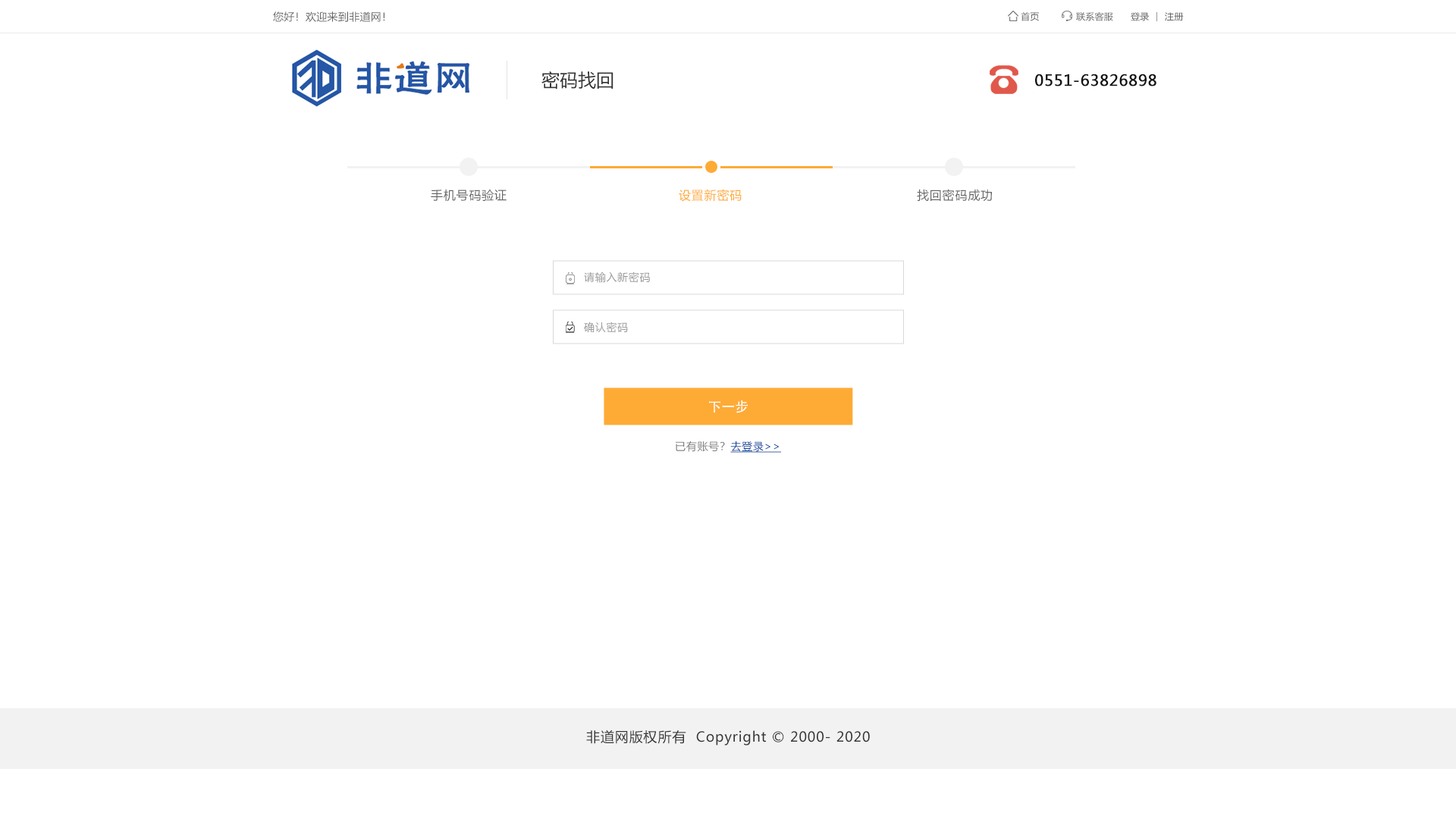
<style>
.page{position:relative;width:1456px;height:819px;background:#ffffff}
.page>*{position:absolute;margin:0}
.t1{font:10.6px "MicrosoftYaHei";letter-spacing:0.022em;color:#666666}
.t2{font:9.1px "MicrosoftYaHei";letter-spacing:0.022em;color:#666666}
.t3{font:18.2px "MicrosoftYaHei";color:#333333}
.t4{font:15.2px "MicrosoftYaHei";letter-spacing:0.022em;color:#121212;font-weight:bold}
.t5{font:12.1px "MicrosoftYaHei";letter-spacing:0.05em;color:#666666}
.t6{font:12.1px "MicrosoftYaHei";letter-spacing:0.05em;color:#feab36}
.t7{font:10.6px "MicrosoftYaHei";letter-spacing:0.05em;color:#999999}
.t8{font:13.5px "AdobeHeitiStd-Regular";color:#ffffff}
.t9{font:10.6px "MicrosoftYaHei";letter-spacing:0.05em;color:#7f7f7f}
.t10{font:10.6px "MicrosoftYaHei";letter-spacing:0.05em;color:#13489e;text-decoration:underline}
.t11{font:13.6px "MicrosoftYaHei";letter-spacing:0.05em;color:#333333}
</style>
<div class="page">
<p class="t1" style="left:273px;top:11px;width:112px;height:11px">您好！欢迎来到非道网！</p>
<p class="t2" style="left:1021px;top:12px;width:18px;height:9px">首页</p>
<p class="t2" style="left:1076px;top:12px;width:37px;height:9px">联系客服</p>
<p class="t2" style="left:1131px;top:12px;width:18px;height:9px">登录</p>
<p class="t2" style="left:1165px;top:12px;width:19px;height:9px">注册</p>
<p class="t3" style="left:541px;top:71px;width:72px;height:18px">密码找回</p>
<p class="t4" style="left:1035px;top:74px;width:121px;height:12px">0551-63826898</p>
<p class="t5" style="left:431px;top:189px;width:76px;height:13px">手机号码验证</p>
<p class="t6" style="left:679px;top:189px;width:63px;height:13px">设置新密码</p>
<p class="t5" style="left:917px;top:189px;width:75px;height:12px">找回密码成功</p>
<p class="t7" style="left:584px;top:271px;width:66px;height:12px">请输入新密码</p>
<p class="t7" style="left:584px;top:322px;width:44px;height:11px">确认密码</p>
<p class="t8" style="left:709px;top:400px;width:39px;height:13px">下一步</p>
<p class="t9" style="left:676px;top:441px;width:105px;height:12px">已有账号？<span class="t10">去登录&gt;&gt;</span></p>
<p class="t11" style="left:586px;top:730px;width:284px;height:15px">非道网版权所有  Copyright © 2000- 2020</p>
</div>
